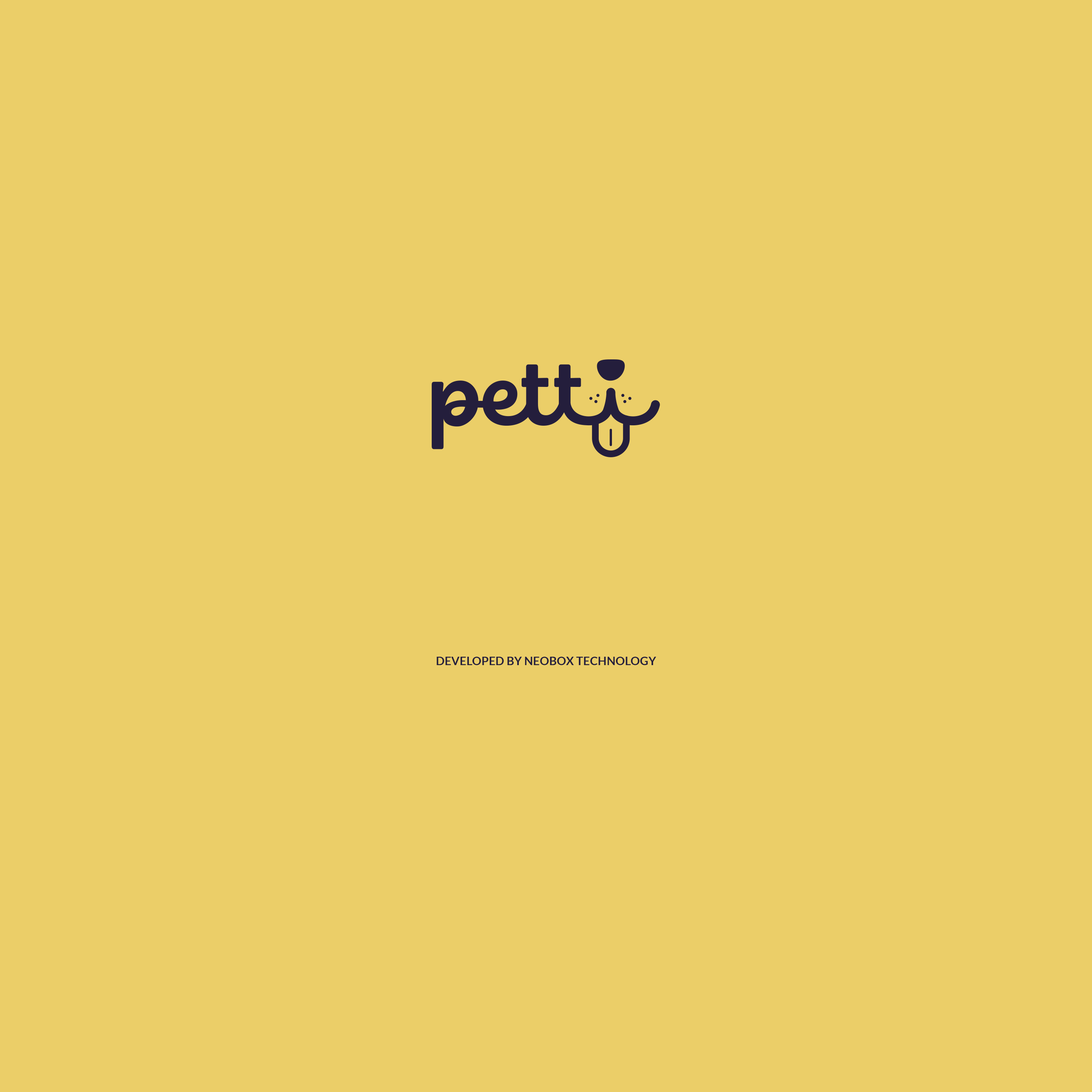
<style>
.page{position:relative;width:1092px;height:1092px;background:#ebce68}
.page>*{position:absolute;margin:0}
.t1{font:11.7px "Lato-Bold";color:#241e3c}
</style>
<div class="page">
<p class="t1" style="left:436px;top:657px;width:220px;height:8px">DEVELOPED BY NEOBOX TECHNOLOGY</p>
</div>
